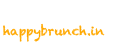
<style>
.page{position:relative;width:120px;height:45px;background:#ffffff}
.page>*{position:absolute;margin:0}
.t1{font:12px "Chalkduster";color:#ffa800}
</style>
<div class="page">
<p class="t1" style="left:3px;top:23px;width:102px;height:19px">happybrunch.in</p>
</div>
